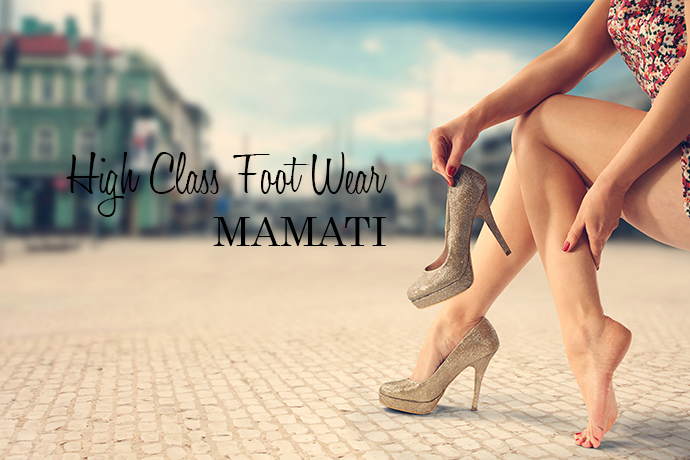
<style>
.page{position:relative;width:690px;height:460px}
.page>*{position:absolute;margin:0}
.t1{font:60px "HoneyScript-Light";color:#000000}
.t2{font:40px "Century";color:#000000}
</style>
<div class="page">
<p class="t1" style="left:66px;top:152px;width:321px;height:65px">High Class Foot Wear</p>
<p class="t2" style="left:213px;top:217px;width:173px;height:29px">MAMATI</p>
</div>
